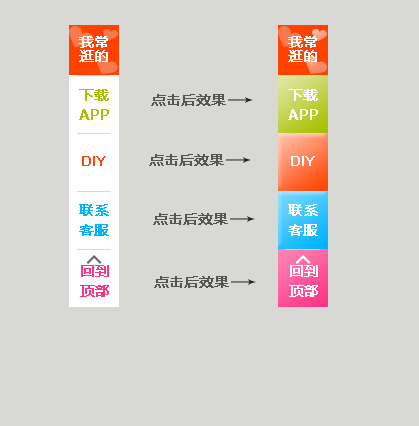
<style>
.page{position:relative;width:419px;height:426px;background:#d8d8d4}
.page>*{position:absolute;margin:0}
.t1{font:14px/14px "MicrosoftYaHei";color:#fffcfb;font-weight:bold}
.t2{font:14px/20px "MicrosoftYaHei";color:#a8c001;font-weight:bold}
.t3{font:14px "ArialMT";color:#ff4504;font-weight:bold}
.t4{font:14px/20px "MicrosoftYaHei";color:#00b3ff;font-weight:bold}
.t5{font:14px/20px "MicrosoftYaHei";color:#fe3586;font-weight:bold}
</style>
<div class="page">
<p class="t1" style="left:79px;top:36px;width:29px;height:26px">我常<br>逛的</p>
<p class="t2" style="left:79px;top:89px;width:30px;height:31px">下载<br>APP</p>
<p class="t3" style="left:82px;top:156px;width:24px;height:10px">DIY</p>
<p class="t4" style="left:79px;top:204px;width:30px;height:32px">联系<br>客服</p>
<p class="t5" style="left:80px;top:265px;width:29px;height:32px">回到<br>顶部</p>
</div>
